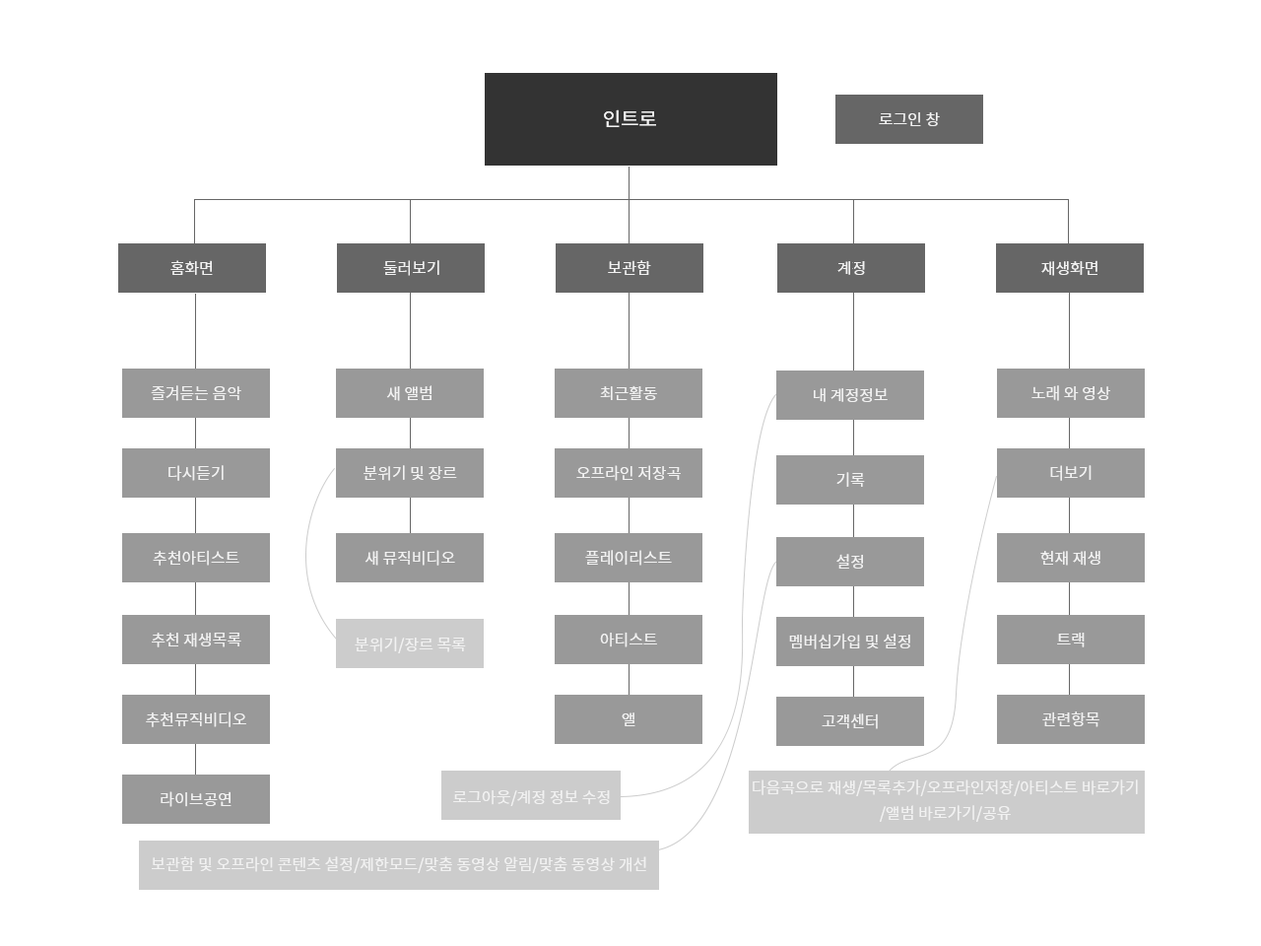
<style>
.page{position:relative;width:1261px;height:946px;background:#ffffff}
.page>*{position:absolute;margin:0}
.t1{font:19.7px "NotoSansKR-Regular";color:#f1f1f1}
.t2{font:15.8px "NotoSansKR-Regular";color:#f1f1f1}
.t3{font:15.8px/25.6px "NotoSansKR-Regular";color:#f1f1f1}
</style>
<div class="page">
<p class="t1" style="left:604px;top:109px;width:52px;height:18px">인트로</p>
<p class="t2" style="left:879px;top:112px;width:61px;height:14px">로그인 창</p>
<p class="t2" style="left:170px;top:260px;width:43px;height:15px">홈화면</p>
<p class="t2" style="left:383px;top:260px;width:56px;height:16px">둘러보기</p>
<p class="t2" style="left:608px;top:260px;width:43px;height:15px">보관함</p>
<p class="t2" style="left:837px;top:261px;width:28px;height:14px">계정</p>
<p class="t2" style="left:1041px;top:260px;width:56px;height:16px">재생화면</p>
<p class="t2" style="left:151px;top:385px;width:90px;height:16px">즐겨듣는 음악</p>
<p class="t2" style="left:386px;top:385px;width:45px;height:16px">새 앨범</p>
<p class="t2" style="left:600px;top:385px;width:57px;height:15px">최근활동</p>
<p class="t2" style="left:814px;top:388px;width:74px;height:14px">내 계정정보</p>
<p class="t2" style="left:1031px;top:385px;width:79px;height:16px">노래 와 영상</p>
<p class="t2" style="left:168px;top:465px;width:56px;height:16px">다시듣기</p>
<p class="t2" style="left:363px;top:465px;width:94px;height:16px">분위기 및 장르</p>
<p class="t2" style="left:576px;top:465px;width:105px;height:16px">오프라인 저장곡</p>
<p class="t2" style="left:836px;top:472px;width:29px;height:15px">기록</p>
<p class="t2" style="left:1050px;top:465px;width:41px;height:16px">더보기</p>
<p class="t2" style="left:153px;top:550px;width:86px;height:15px">추천아티스트</p>
<p class="t2" style="left:364px;top:550px;width:91px;height:15px">새 뮤직비디오</p>
<p class="t2" style="left:585px;top:550px;width:87px;height:15px">플레이리스트</p>
<p class="t2" style="left:836px;top:554px;width:27px;height:14px">설정</p>
<p class="t2" style="left:1040px;top:551px;width:60px;height:14px">현재 재생</p>
<p class="t2" style="left:152px;top:632px;width:89px;height:15px">추천 재생목록</p>
<p class="t2" style="left:355px;top:636px;width:111px;height:17px">분위기/장르 목록</p>
<p class="t2" style="left:600px;top:631px;width:57px;height:16px">아티스트</p>
<p class="t2" style="left:789px;top:633px;width:121px;height:16px">멤버십가입 및 설정</p>
<p class="t2" style="left:1057px;top:632px;width:28px;height:15px">트랙</p>
<p class="t2" style="left:146px;top:711px;width:100px;height:16px">추천뮤직비디오</p>
<p class="t2" style="left:622px;top:712px;width:13px;height:14px">앨</p>
<p class="t2" style="left:822px;top:713px;width:56px;height:16px">고객센터</p>
<p class="t2" style="left:1042px;top:711px;width:57px;height:16px">관련항목</p>
<p class="t3" style="left:753px;top:779px;width:385px;height:43px;text-align:center">다음곡으로 재생/목록추가/오프라인저장/아티스트 바로가기<br>/앨범 바로가기/공유</p>
<p class="t2" style="left:161px;top:791px;width:70px;height:16px">라이브공연</p>
<p class="t2" style="left:453px;top:790px;width:157px;height:16px">로그아웃/계정 정보 수정</p>
<p class="t2" style="left:152px;top:856px;width:494px;height:17px">보관함 및 오프라인 콘텐츠 설정/제한모드/맞춤 동영상 알림/맞춤 동영상 개선</p>
</div>
